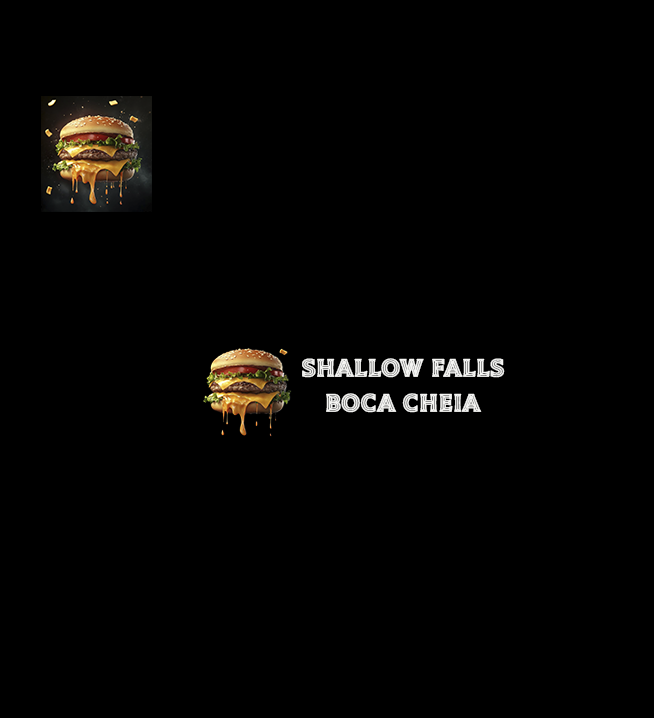
<style>
.page{position:relative;width:654px;height:718px;background:#000000}
.page>*{position:absolute;margin:0}
.t1{font:29px "TiltPrism-Regular";color:#f5f5f3;font-weight:bold}
</style>
<div class="page">
<p class="t1" style="left:302px;top:358px;width:203px;height:55px;text-align:center">shallow falls<br>boca cheia<br>bo</p>
</div>
